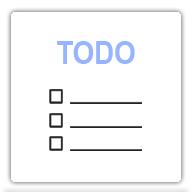
<style>
.page{position:relative;width:192px;height:192px;background:#ffffff}
.page>*{position:absolute;margin:0}
.t1{font:32.2px "Arial-BoldMT";color:#96b4ff;scale:0.86 1}
</style>
<div class="page">
<p class="t1" style="left:57px;top:41px;width:78px;height:23px">TODO</p>
</div>
